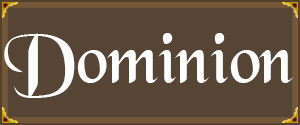
<style>
.page{position:relative;width:300px;height:125px;background:#564534}
.page>*{position:absolute;margin:0}
.t1{font:73.9px "BlackChancery";color:#fefefe}
</style>
<div class="page">
<p class="t1" style="left:4px;top:33px;width:289px;height:65px">Dominion</p>
</div>
